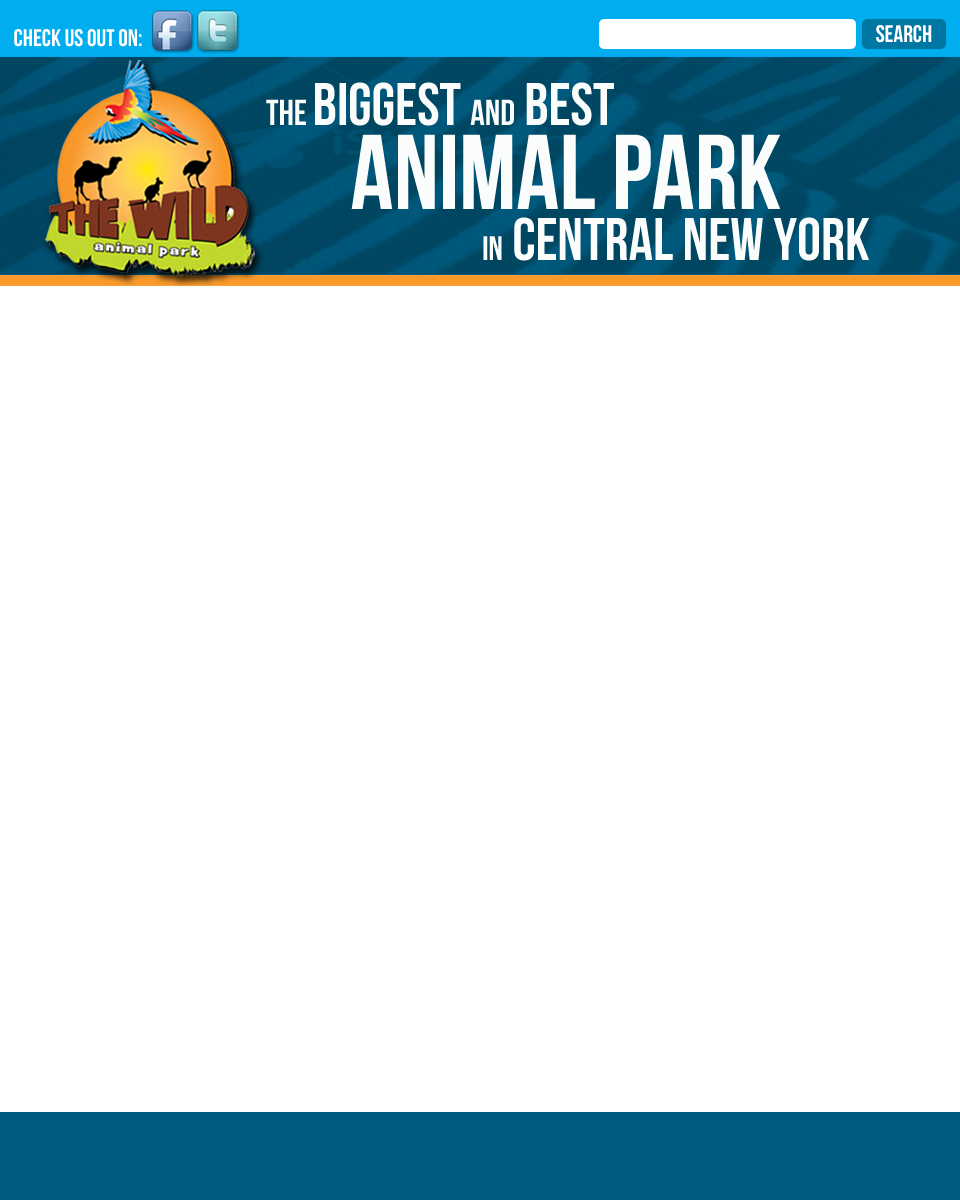
<style>
.page{position:relative;width:960px;height:1200px;background:#ffffff}
.page>*{position:absolute;margin:0}
.t1{font:24px "BebasNeue";color:#ffffff}
.t2{font:60px "BebasNeue";color:#fbfcfc}
.t3{font:36px "BebasNeue";color:#fbfcfc}
.t4{font:106px "BebasNeue";color:#fbfcfc}
.t5{font:34px "BebasNeue";color:#fbfcfc}
</style>
<div class="page">
<p class="t1" style="left:14px;top:29px;width:128px;height:18px">check us out on:</p>
<p class="t1" style="left:876px;top:25px;width:56px;height:18px">search</p>
<p class="t2" style="left:266px;top:82px;width:348px;height:44px"><span class="t3">the </span>BIGGEST <span class="t3">AND</span> BEST</p>
<p class="t4" style="left:351px;top:134px;width:430px;height:75px">ANIMAL PARK</p>
<p class="t2" style="left:483px;top:217px;width:386px;height:44px"><span class="t5">IN</span> CENTRAL NEW YORK</p>
</div>
